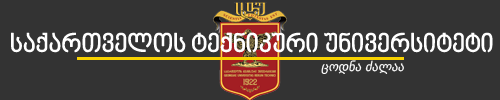
<style>
.page{position:relative;width:500px;height:100px;background:#333333}
.page>*{position:absolute;margin:0}
.t1{font:25px "BPGNinoMtavruli";color:#ffffff;font-weight:bold}
.t2{font:12.5px "BPGDejaVuSans";color:#ffffff;font-style:italic}
</style>
<div class="page">
<p class="t1" style="left:11px;top:32px;width:482px;height:21px">საქართველოს ტექნიკური უნივერსიტეტი</p>
<p class="t2" style="left:321px;top:60px;width:83px;height:14px">ცოდნა ძალაა</p>
</div>
